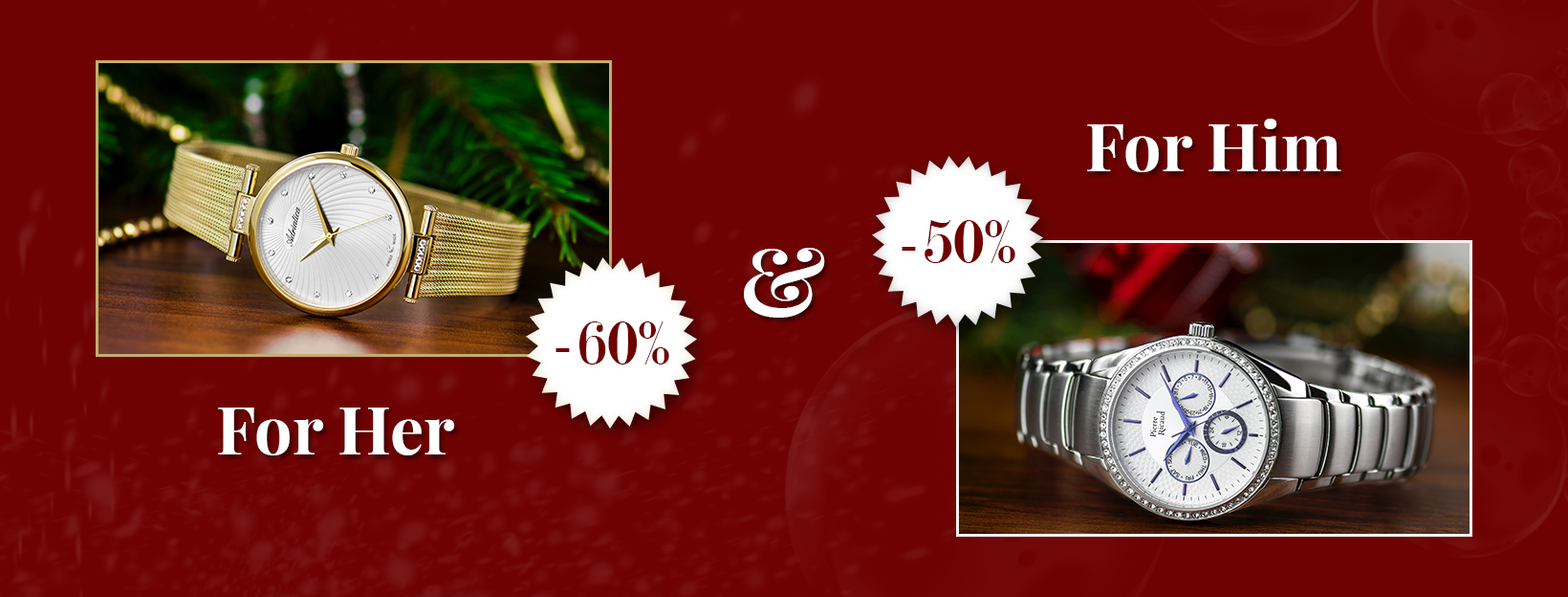
<style>
.page{position:relative;width:1568px;height:597px;background:#6e0202}
.page>*{position:absolute;margin:0}
.t1{font:66.9px "PlayfairDisplay-Bold";color:#ffffff}
.t2{font:66.9px "Modern-Regular";color:#6f0303}
.t3{font:95.6px "PlayfairDisplay-Bold";color:#ffffff}
</style>
<div class="page">
<p class="t1" style="left:1087px;top:119px;width:254px;height:53px">For Him</p>
<p class="t2" style="left:902px;top:220px;width:113px;height:43px">-50%</p>
<p class="t3" style="left:744px;top:248px;width:81px;height:69px">&amp;</p>
<p class="t2" style="left:555px;top:321px;width:114px;height:43px">-60%</p>
<p class="t1" style="left:218px;top:407px;width:237px;height:48px">For Her</p>
</div>
